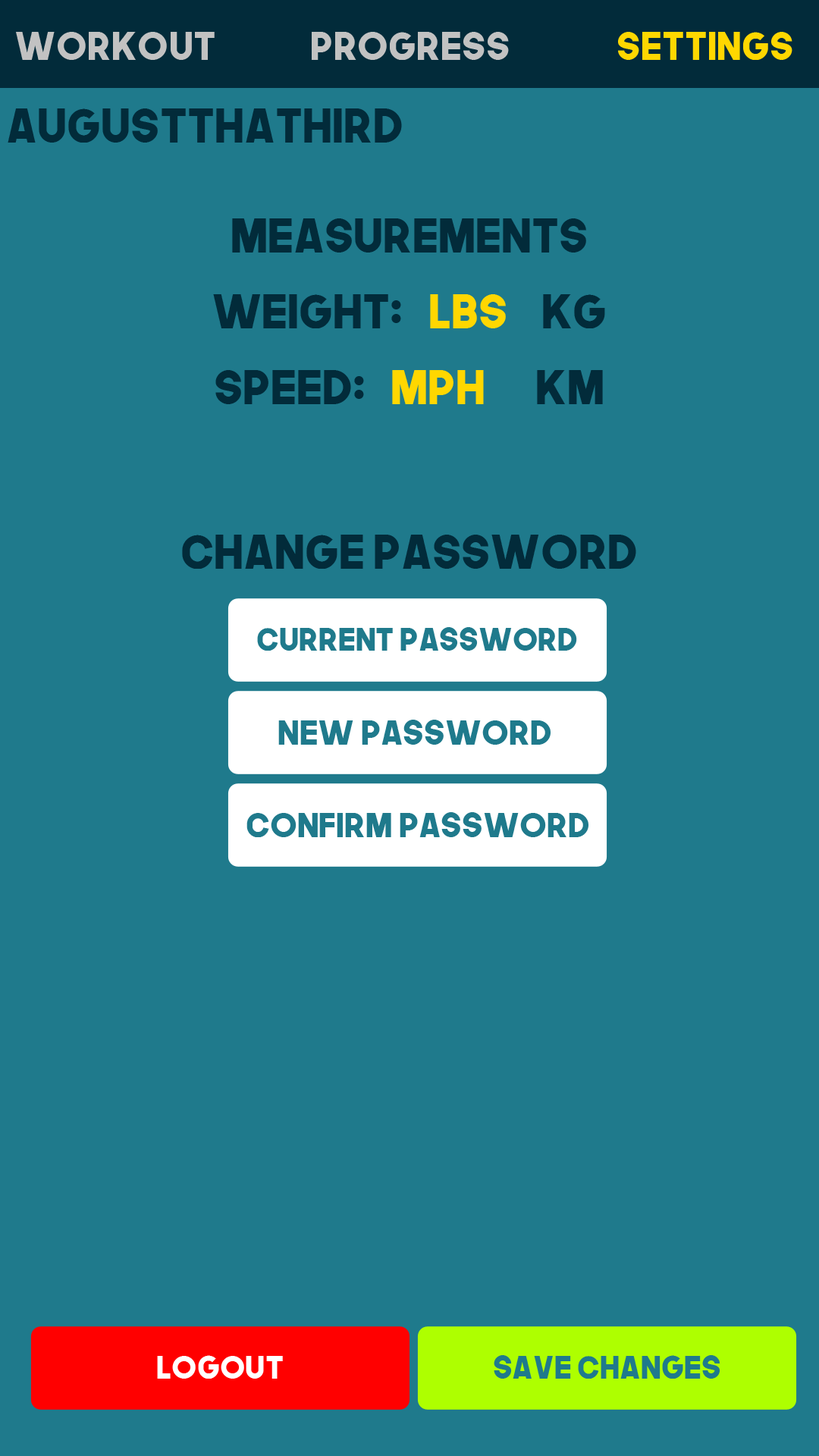
<style>
.page{position:relative;width:819px;height:1456px;background:#1f7a8c}
.page>*{position:absolute;margin:0}
.t1{font:38.3px "TheNextFont";color:#c2c2c2}
.t2{font:38.3px "TheNextFont";color:#ffd700}
.t3{font:46.4px "TheNextFont";color:#022b3a}
.t4{font:46.4px "TheNextFont";color:#ffd700}
.t5{font:31.2px "TheNextFont";color:#1f7a8c}
.t6{font:33.5px "TheNextFont";color:#1f7a8c}
.t7{font:31.2px "TheNextFont";color:#ffffff}
</style>
<div class="page">
<p class="t1" style="left:16px;top:32px;width:199px;height:28px">Workout</p>
<p class="t1" style="left:312px;top:32px;width:197px;height:28px">Progress</p>
<p class="t2" style="left:618px;top:32px;width:174px;height:28px">Settings</p>
<p class="t3" style="left:8px;top:108px;width:394px;height:35px">AugustThaThird</p>
<p class="t3" style="left:232px;top:218px;width:354px;height:35px">Measurements</p>
<p class="t3" style="left:213px;top:294px;width:392px;height:34px">Weight:   <span class="t4">LBs    </span>KG</p>
<p class="t3" style="left:215px;top:370px;width:388px;height:34px">Speed:   <span class="t4">MPH      </span>KM</p>
<p class="t3" style="left:182px;top:535px;width:454px;height:34px">Change Password</p>
<p class="t5" style="left:257px;top:627px;width:320px;height:24px">Current Password</p>
<p class="t6" style="left:278px;top:720px;width:273px;height:25px">New Password</p>
<p class="t6" style="left:246px;top:812px;width:342px;height:25px">Confirm Password</p>
<p class="t7" style="left:157px;top:1355px;width:126px;height:24px">LogOut</p>
<p class="t5" style="left:494px;top:1355px;width:226px;height:24px">Save Changes</p>
</div>
